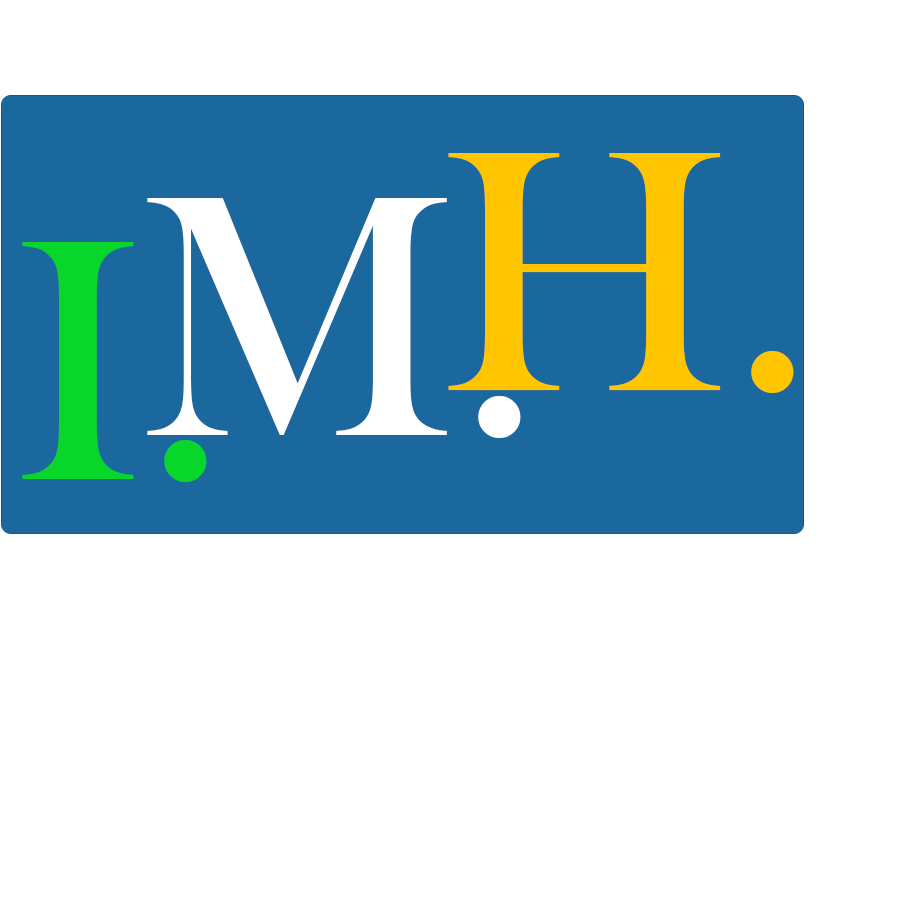
<style>
.page{position:relative;width:900px;height:900px;background:#ffffff}
.page>*{position:absolute;margin:0}
.t1{font:355.4px "BaskOldFace";color:#ffc600}
.t2{font:355.4px "BaskOldFace";color:#ffffff}
.t3{font:355.4px "BaskOldFace";color:#08d62a}
</style>
<div class="page">
<p class="t1" style="left:448px;top:153px;width:346px;height:240px">H.</p>
<p class="t2" style="left:147px;top:198px;width:374px;height:240px">M.</p>
<p class="t3" style="left:22px;top:242px;width:185px;height:240px">I.</p>
</div>
